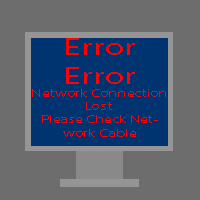
<style>
.page{position:relative;width:200px;height:200px;background:#6d6d6d}
.page>*{position:absolute;margin:0}
.t1{font:11px "MyriadPro-Regular";color:#ff000c;scale:1.5 1}
.t2{font:24px "MyriadPro-Regular";color:#ff0000;scale:1.5 1}
.t3{font:24px "MyriadPro-Regular";color:#ff000c;scale:1.5 1}
</style>
<div class="page">
<p class="t1" style="left:32px;top:38px;width:134px;height:99px;text-align:center"><span class="t2">Error<br></span><span class="t3">Error<br></span>Network Connection Lost.<br>Please Check Network Cable</p>
</div>
